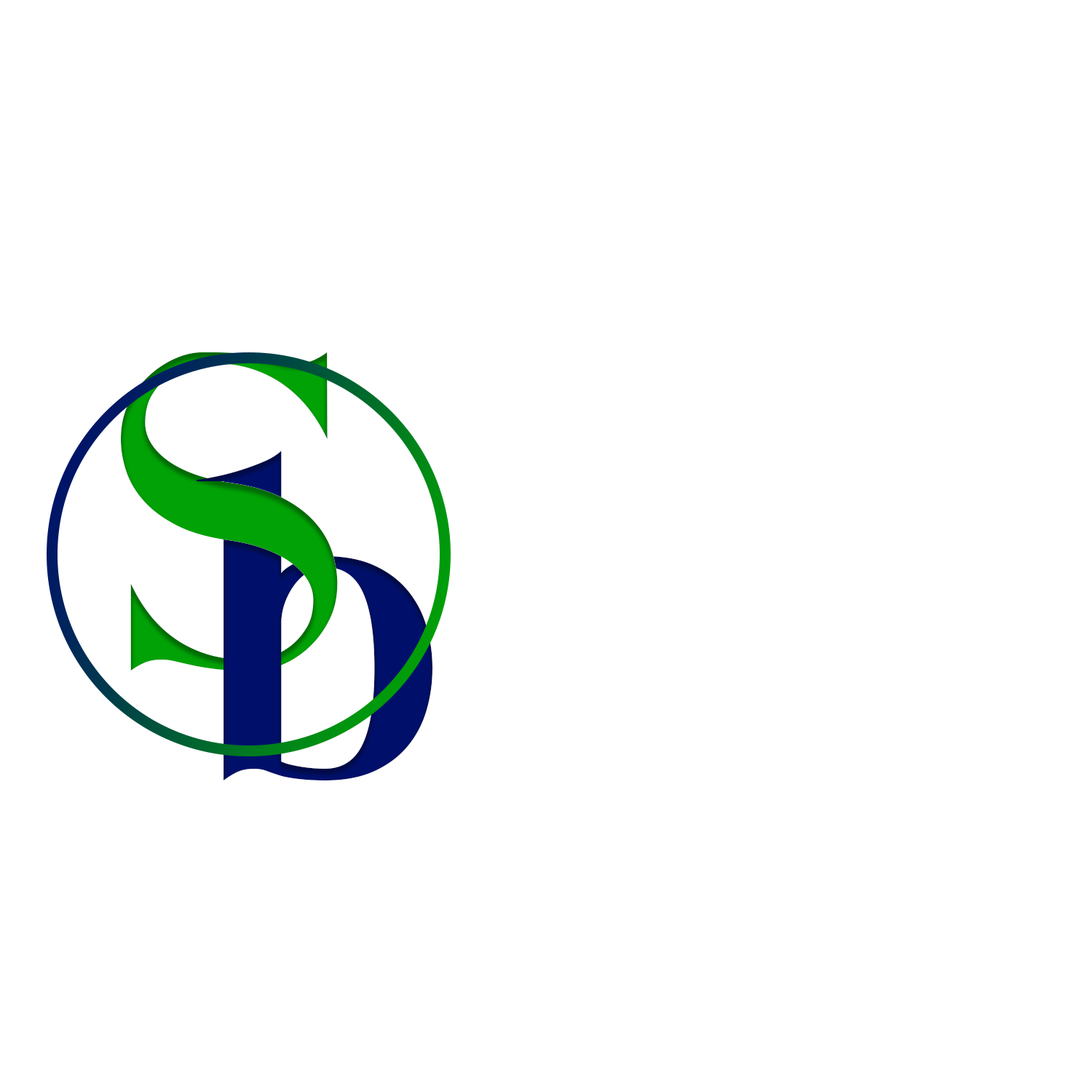
<style>
.page{position:relative;width:1092px;height:1092px;background:#ffffff}
.page>*{position:absolute;margin:0}
.t1{font:303.3px "BasicsSerifFree-Regular";color:#00a205}
.t2{font:314.5px "BasicsSerifFree-Regular";color:#00106a;scale:0.96 1}
</style>
<div class="page">
<p class="t1" style="left:121px;top:352px;width:217px;height:318px">S</p>
<p class="t2" style="left:197px;top:451px;width:235px;height:329px">b</p>
</div>
